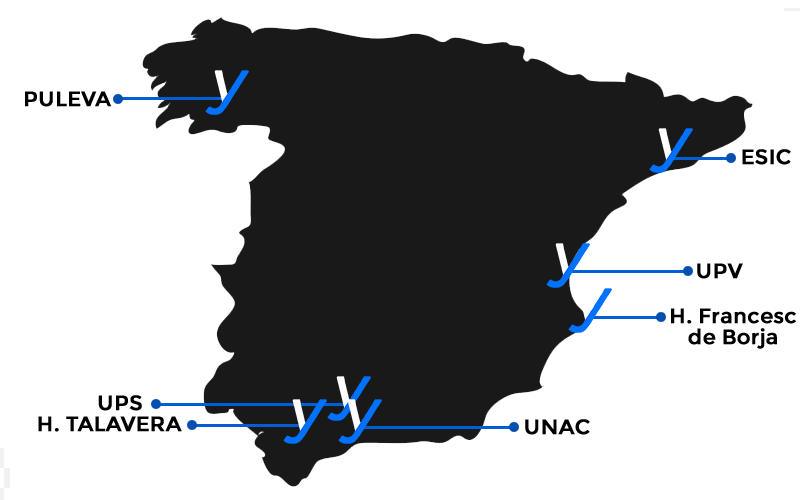
<style>
.page{position:relative;width:800px;height:500px;background:#ffffff}
.page>*{position:absolute;margin:0}
.t1{font:20.8px "Montserrat-Regular";color:#000000;font-weight:bold}
.t2{font:20.8px/8.2px "Montserrat-Regular";color:#000000;font-weight:bold}
.t3{font:20.8px/21.2px "Montserrat-Regular";color:#000000;font-weight:bold}
</style>
<div class="page">
<p class="t1" style="left:25px;top:91px;width:87px;height:16px">PULEVA</p>
<p class="t1" style="left:742px;top:149px;width:49px;height:16px">ESIC</p>
<p class="t1" style="left:697px;top:263px;width:46px;height:16px">UPV</p>
<p class="t2" style="left:671px;top:308px;width:125px;height:41px;text-align:center">H. Francesc<br><span class="t3">de Borja</span></p>
<p class="t1" style="left:98px;top:395px;width:44px;height:16px">UPS</p>
<p class="t1" style="left:38px;top:416px;width:144px;height:16px">H. TALAVERA</p>
<p class="t1" style="left:525px;top:419px;width:65px;height:16px">UNAC</p>
</div>
